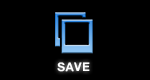
<style>
.page{position:relative;width:150px;height:80px;background:#000000}
.page>*{position:absolute;margin:0}
.t1{font:12px "AlteHaasGrotesk_Bold";letter-spacing:0.05em;color:#ffffff}
</style>
<div class="page">
<p class="t1" style="left:57px;top:62px;width:33px;height:10px">SAVE</p>
</div>
